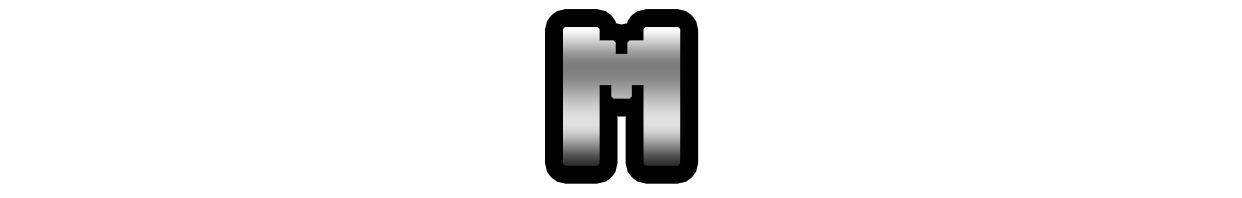
<style>
.page{position:relative;width:1242px;height:198px;background:#ffffff}
.page>*{position:absolute;margin:0}
.t1{font:215px "DOSIyagiMedium";letter-spacing:0.16em;font-weight:bold;scale:1.2 1}
</style>
<div class="page">
<p class="t1" style="left:563px;top:27px;width:118px;height:139px">M</p>
</div>
